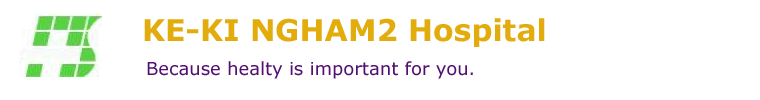
<style>
.page{position:relative;width:760px;height:100px;background:#ffffff}
.page>*{position:absolute;margin:0}
.t1{font:30px "Verdana-Bold";color:#e1ac0c}
.t2{font:17.1px "Verdana";color:#521071}
</style>
<div class="page">
<p class="t1" style="left:144px;top:18px;width:401px;height:29px">KE-KI NGHAM2 Hospital</p>
<p class="t2" style="left:147px;top:61px;width:326px;height:18px">Because healty is important for you.</p>
</div>
